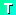
<style>
.page{position:relative;width:16px;height:15px}
.page>*{position:absolute;margin:0}
.t1{font:14.5px "NirmalaUI-Bold";color:#ffffff}
</style>
<div class="page">
<p class="t1" style="left:4px;top:3px;width:9px;height:10px">T</p>
</div>
